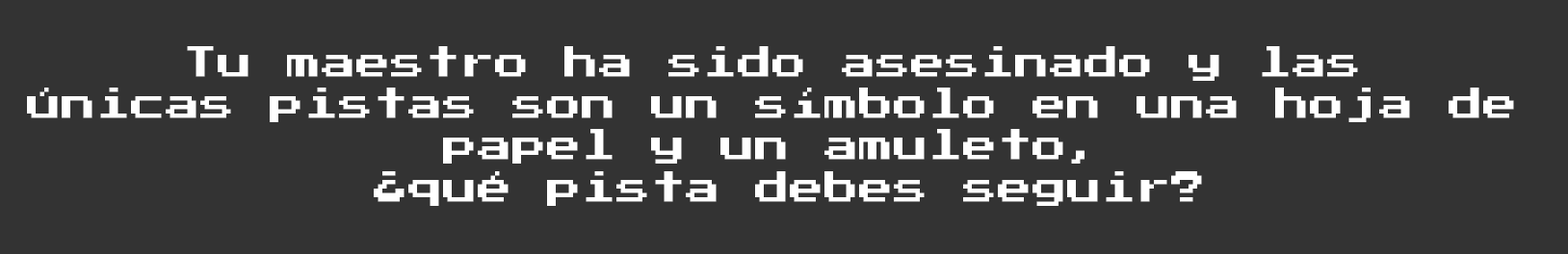
<style>
.page{position:relative;width:1568px;height:254px;background:#333333}
.page>*{position:absolute;margin:0}
.t1{font:34.7px "PressStart2P";color:#ffffff}
</style>
<div class="page">
<p class="t1" style="left:27px;top:46px;width:1487px;height:160px;text-align:center">Tu maestro ha sido asesinado y las <br>únicas pistas son un símbolo en una hoja de <br>papel y un amuleto, <br>¿qué pista debes seguir?</p>
</div>
